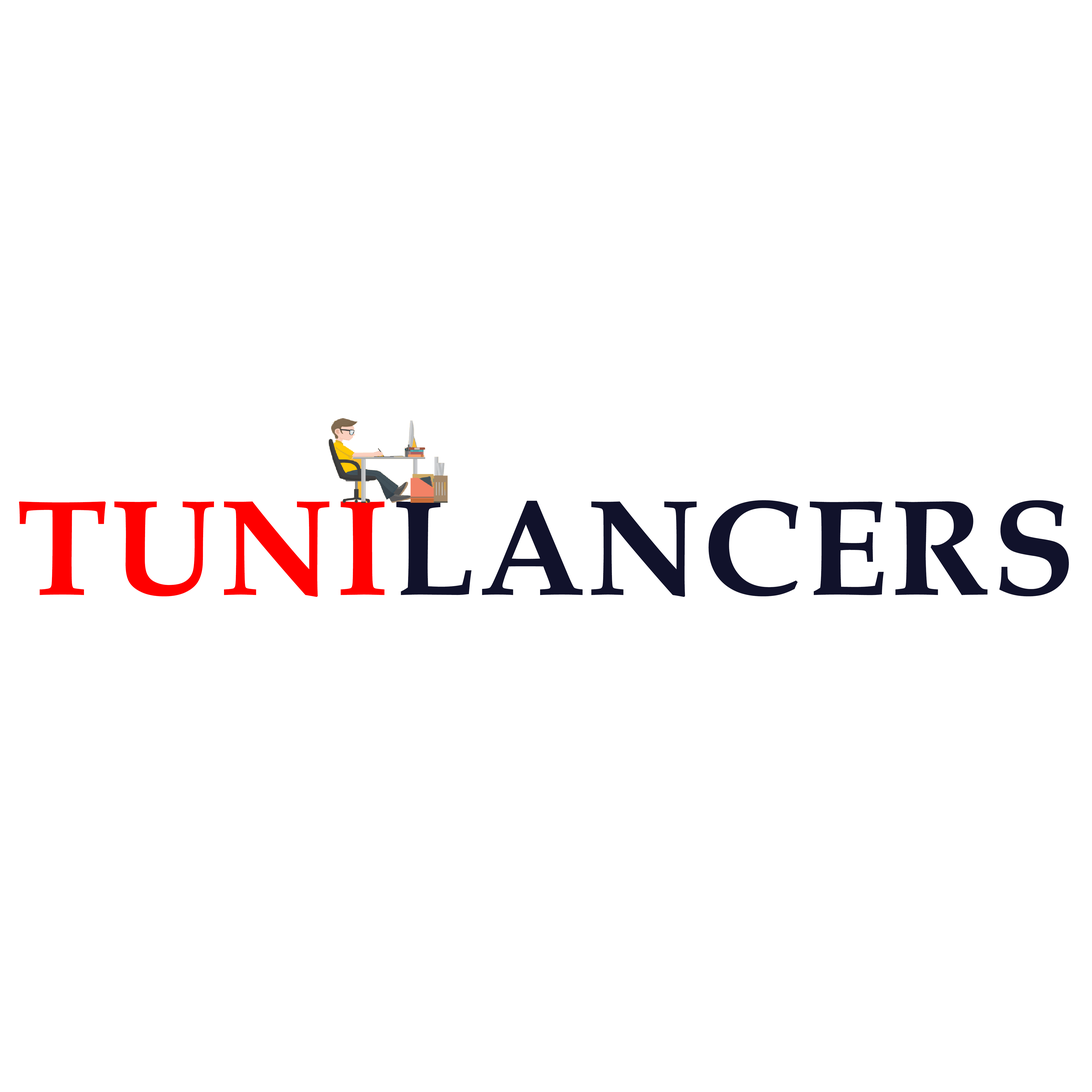
<style>
.page{position:relative;width:1092px;height:1092px;background:#ffffff}
.page>*{position:absolute;margin:0}
.t1{font:136.5px "BookAntiqua-Bold";letter-spacing:0.02em;color:#11122b;text-transform:uppercase}
.t2{font:136.5px "BookAntiqua-Bold";letter-spacing:0.02em;color:#ff0000;text-transform:uppercase}
</style>
<div class="page">
<p class="t1" style="left:19px;top:500px;width:1050px;height:97px"><span class="t2">Tuni</span>lancers</p>
</div>
